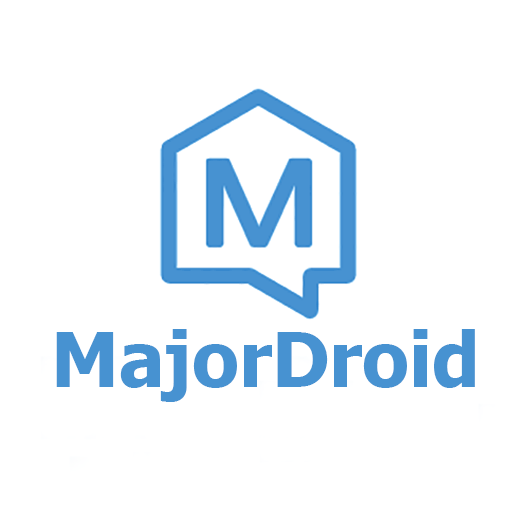
<style>
.page{position:relative;width:512px;height:512px;background:#ffffff}
.page>*{position:absolute;margin:0}
.t1{font:76.1px "Tahoma-Bold";color:#4792d1}
</style>
<div class="page">
<p class="t1" style="left:56px;top:329px;width:419px;height:73px">MajorDroid</p>
</div>
